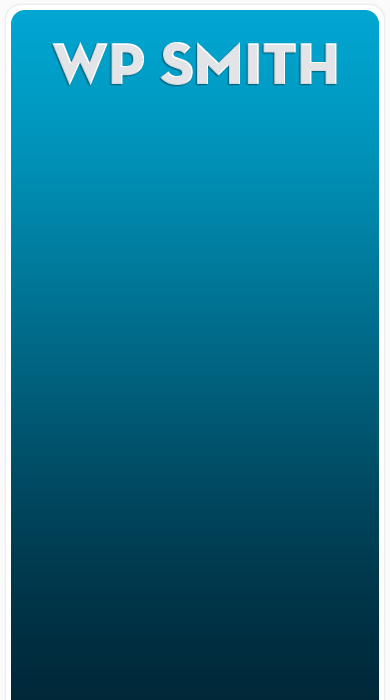
<style>
.page{position:relative;width:390px;height:700px}
.page>*{position:absolute;margin:0}
.t1{font:59.8px "NeutraDisp-Titling";color:#e2e4e8}
</style>
<div class="page">
<p class="t1" style="left:52px;top:42px;width:285px;height:43px">WP Smith</p>
</div>
